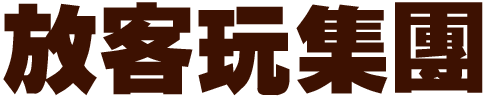
<style>
.page{position:relative;width:486px;height:96px;background:#3d1101}
.page>*{position:absolute;margin:0}
.t1{font:97.4px "IDHeiUltra";letter-spacing:0.02em;color:#3d1101}
</style>
<div class="page">
<p class="t1" style="left:3px;top:2px;width:480px;height:94px">放客玩集團</p>
</div>
